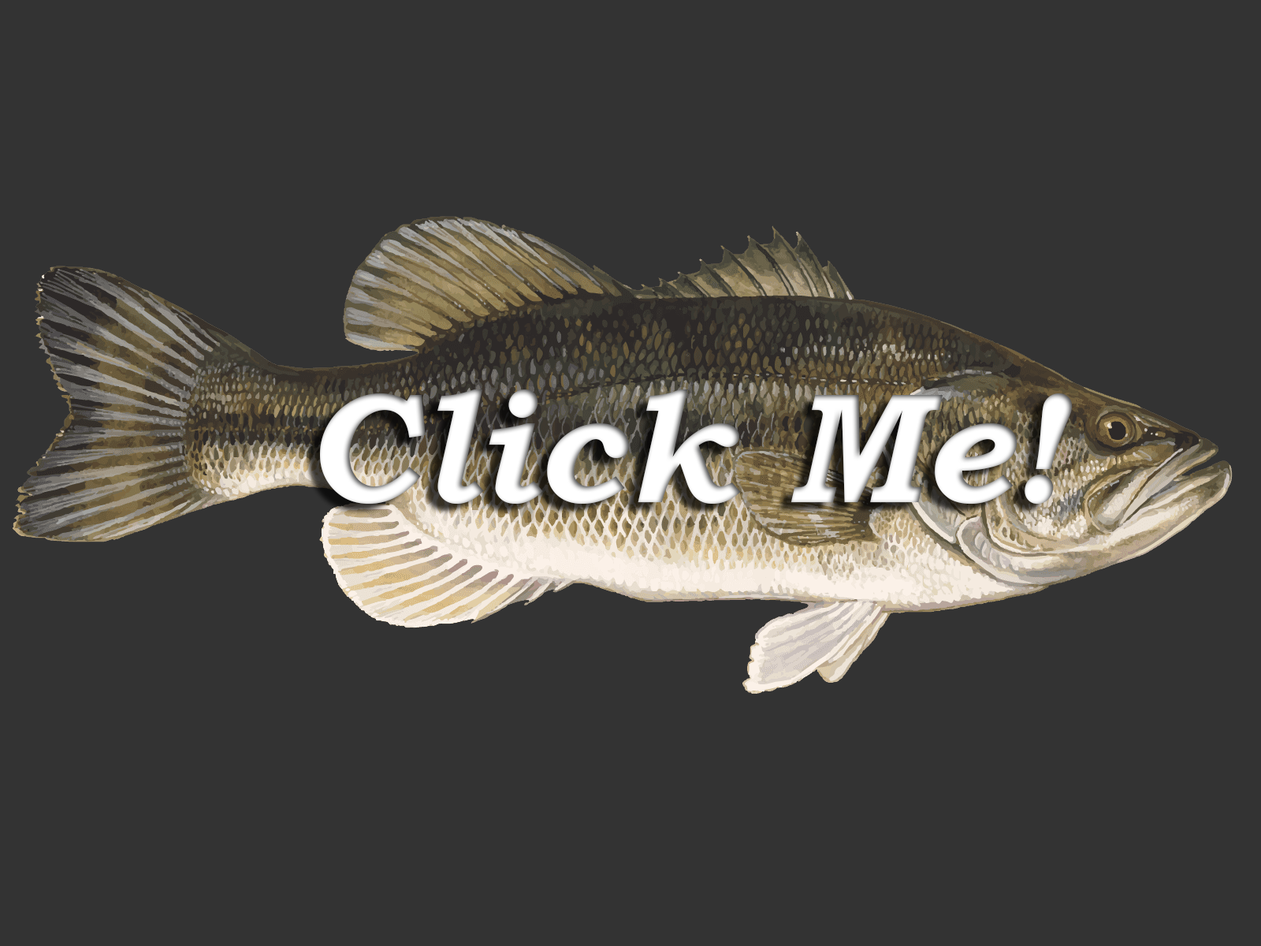
<style>
.page{position:relative;width:1261px;height:946px;background:#333333}
.page>*{position:absolute;margin:0}
.t1{font:157.6px "BookmanOldStyle-BoldItalic";color:#ffffff}
</style>
<div class="page">
<p class="t1" style="left:320px;top:389px;width:753px;height:115px">Click Me!</p>
</div>
